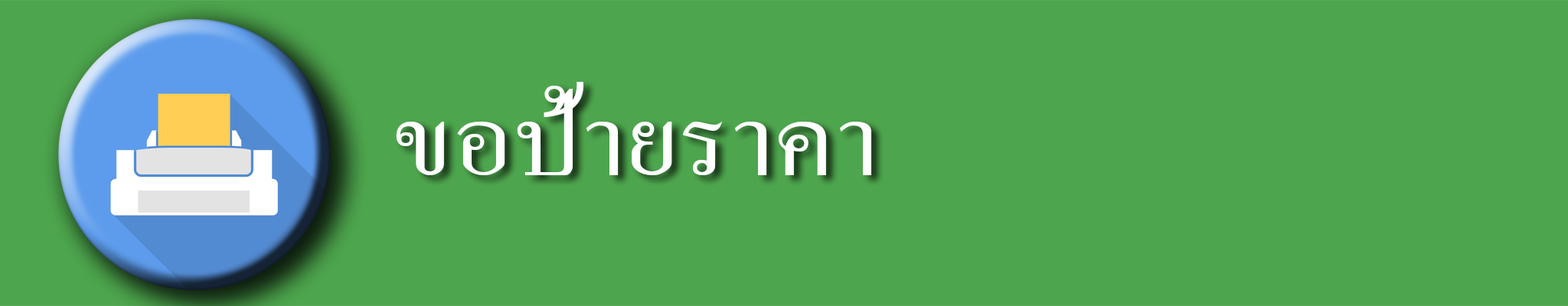
<style>
.page{position:relative;width:1568px;height:306px;background:#4da64d}
.page>*{position:absolute;margin:0}
.t1{font:133.7px "AngsanaNew";color:#ffffff;scale:1.15 1}
</style>
<div class="page">
<p class="t1" style="left:396px;top:82px;width:475px;height:93px">ขอป้ายราคา</p>
</div>
